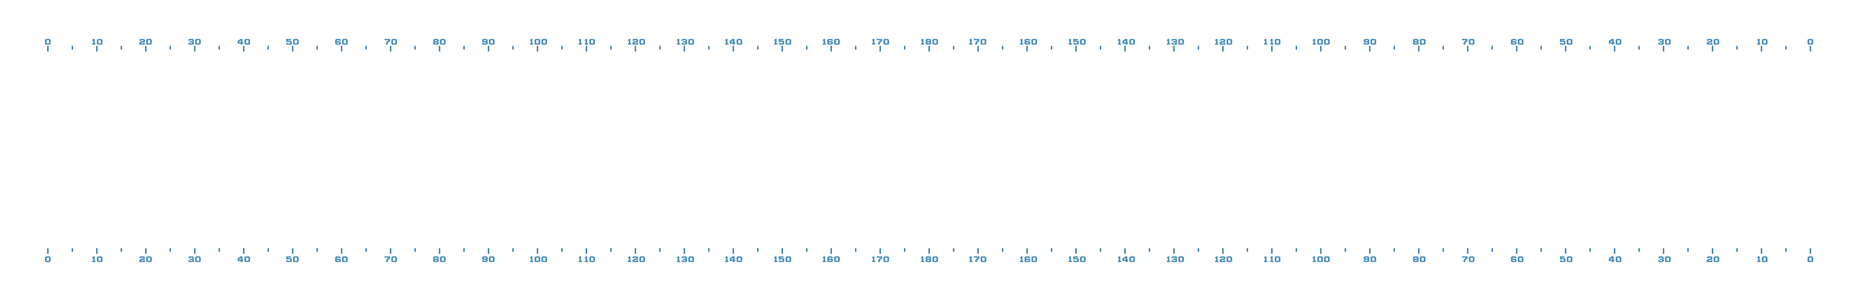
<style>
.page{position:relative;width:1863px;height:288px;background:#ffffff}
.page>*{position:absolute;margin:0}
.t1{font:9px "Strikers-1945";letter-spacing:0.045em;color:#4d91bd;scale:1.41 1}
</style>
<div class="page">
<p class="t1" style="left:45px;top:39px;width:6px;height:6px">0</p>
<p class="t1" style="left:92px;top:39px;width:11px;height:6px">10</p>
<p class="t1" style="left:139px;top:39px;width:13px;height:6px">20</p>
<p class="t1" style="left:188px;top:39px;width:13px;height:6px">30</p>
<p class="t1" style="left:238px;top:39px;width:12px;height:6px">40</p>
<p class="t1" style="left:286px;top:39px;width:13px;height:6px">50</p>
<p class="t1" style="left:335px;top:39px;width:13px;height:6px">60</p>
<p class="t1" style="left:384px;top:39px;width:13px;height:6px">70</p>
<p class="t1" style="left:433px;top:39px;width:13px;height:6px">80</p>
<p class="t1" style="left:482px;top:39px;width:13px;height:6px">90</p>
<p class="t1" style="left:530px;top:39px;width:17px;height:6px">100</p>
<p class="t1" style="left:579px;top:39px;width:16px;height:6px">110</p>
<p class="t1" style="left:628px;top:39px;width:17px;height:6px">120</p>
<p class="t1" style="left:677px;top:39px;width:17px;height:6px">130</p>
<p class="t1" style="left:725px;top:39px;width:17px;height:6px">140</p>
<p class="t1" style="left:774px;top:39px;width:17px;height:6px">150</p>
<p class="t1" style="left:823px;top:39px;width:17px;height:6px">160</p>
<p class="t1" style="left:872px;top:39px;width:17px;height:6px">170</p>
<p class="t1" style="left:921px;top:39px;width:17px;height:6px">180</p>
<p class="t1" style="left:969px;top:39px;width:17px;height:6px">170</p>
<p class="t1" style="left:1020px;top:39px;width:17px;height:6px">160</p>
<p class="t1" style="left:1068px;top:39px;width:18px;height:6px">150</p>
<p class="t1" style="left:1118px;top:39px;width:17px;height:6px">140</p>
<p class="t1" style="left:1167px;top:39px;width:17px;height:6px">130</p>
<p class="t1" style="left:1215px;top:39px;width:17px;height:6px">120</p>
<p class="t1" style="left:1264px;top:39px;width:17px;height:6px">110</p>
<p class="t1" style="left:1313px;top:39px;width:17px;height:6px">100</p>
<p class="t1" style="left:1364px;top:39px;width:12px;height:6px">90</p>
<p class="t1" style="left:1413px;top:39px;width:13px;height:6px">80</p>
<p class="t1" style="left:1462px;top:39px;width:13px;height:6px">70</p>
<p class="t1" style="left:1511px;top:39px;width:13px;height:6px">60</p>
<p class="t1" style="left:1560px;top:39px;width:12px;height:6px">50</p>
<p class="t1" style="left:1609px;top:39px;width:12px;height:6px">40</p>
<p class="t1" style="left:1658px;top:39px;width:13px;height:6px">30</p>
<p class="t1" style="left:1707px;top:39px;width:12px;height:6px">20</p>
<p class="t1" style="left:1757px;top:39px;width:11px;height:6px">10</p>
<p class="t1" style="left:1808px;top:39px;width:5px;height:6px">0</p>
<p class="t1" style="left:45px;top:256px;width:6px;height:6px">0</p>
<p class="t1" style="left:92px;top:256px;width:11px;height:6px">10</p>
<p class="t1" style="left:139px;top:256px;width:13px;height:6px">20</p>
<p class="t1" style="left:188px;top:256px;width:13px;height:6px">30</p>
<p class="t1" style="left:238px;top:256px;width:12px;height:6px">40</p>
<p class="t1" style="left:286px;top:256px;width:13px;height:6px">50</p>
<p class="t1" style="left:335px;top:256px;width:13px;height:6px">60</p>
<p class="t1" style="left:384px;top:256px;width:13px;height:6px">70</p>
<p class="t1" style="left:433px;top:256px;width:13px;height:6px">80</p>
<p class="t1" style="left:482px;top:256px;width:13px;height:6px">90</p>
<p class="t1" style="left:530px;top:256px;width:17px;height:6px">100</p>
<p class="t1" style="left:579px;top:256px;width:16px;height:6px">110</p>
<p class="t1" style="left:628px;top:256px;width:17px;height:6px">120</p>
<p class="t1" style="left:677px;top:256px;width:17px;height:6px">130</p>
<p class="t1" style="left:725px;top:256px;width:17px;height:6px">140</p>
<p class="t1" style="left:774px;top:256px;width:17px;height:6px">150</p>
<p class="t1" style="left:823px;top:256px;width:17px;height:6px">160</p>
<p class="t1" style="left:872px;top:256px;width:17px;height:6px">170</p>
<p class="t1" style="left:921px;top:256px;width:17px;height:6px">180</p>
<p class="t1" style="left:969px;top:256px;width:17px;height:6px">170</p>
<p class="t1" style="left:1020px;top:256px;width:17px;height:6px">160</p>
<p class="t1" style="left:1068px;top:256px;width:18px;height:6px">150</p>
<p class="t1" style="left:1118px;top:256px;width:17px;height:6px">140</p>
<p class="t1" style="left:1167px;top:256px;width:17px;height:6px">130</p>
<p class="t1" style="left:1215px;top:256px;width:17px;height:6px">120</p>
<p class="t1" style="left:1264px;top:256px;width:17px;height:6px">110</p>
<p class="t1" style="left:1313px;top:256px;width:17px;height:6px">100</p>
<p class="t1" style="left:1364px;top:256px;width:12px;height:6px">90</p>
<p class="t1" style="left:1413px;top:256px;width:13px;height:6px">80</p>
<p class="t1" style="left:1462px;top:256px;width:13px;height:6px">70</p>
<p class="t1" style="left:1511px;top:256px;width:13px;height:6px">60</p>
<p class="t1" style="left:1560px;top:256px;width:12px;height:6px">50</p>
<p class="t1" style="left:1609px;top:256px;width:12px;height:6px">40</p>
<p class="t1" style="left:1658px;top:256px;width:13px;height:6px">30</p>
<p class="t1" style="left:1707px;top:256px;width:12px;height:6px">20</p>
<p class="t1" style="left:1757px;top:256px;width:11px;height:6px">10</p>
<p class="t1" style="left:1808px;top:256px;width:5px;height:6px">0</p>
</div>
